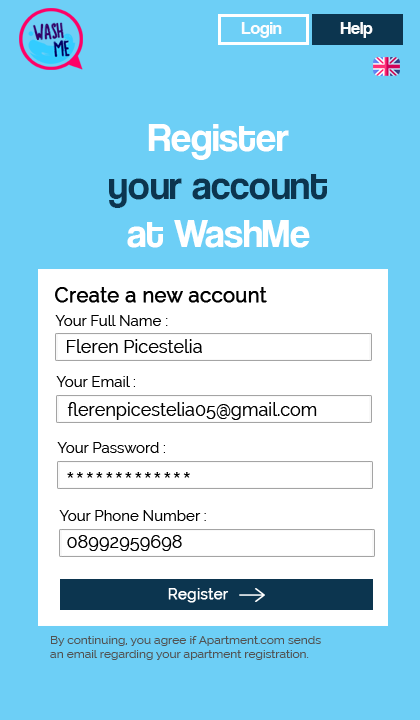
<style>
.page{position:relative;width:420px;height:720px;background:#6dcff6}
.page>*{position:absolute;margin:0}
.t1{font:18px "CoolveticaRg-Regular";color:#fbfdfe}
.t2{font:40px "CoolveticaRg-Regular";color:#0c354f}
.t3{font:40px "CoolveticaRg-Regular";color:#ffffff}
.t4{font:20px "Raleway";color:#000000;font-weight:bold}
.t5{font:15px "Raleway";color:#000000}
.t6{font:18px "Raleway";color:#000000}
.t7{font:30px "Raleway";color:#000000}
.t8{font:15px "Raleway";color:#ffffff;font-weight:bold}
.t9{font:12px "Raleway";color:#515252}
</style>
<div class="page">
<p class="t1" style="left:241px;top:22px;width:41px;height:16px">Login</p>
<p class="t1" style="left:340px;top:22px;width:33px;height:16px">Help</p>
<p class="t2" style="left:109px;top:124px;width:218px;height:124px;text-align:center"><span class="t3">Register<br></span>your account<br><span class="t3">at WashMe</span></p>
<p class="t4" style="left:55px;top:287px;width:212px;height:16px">Create a new account</p>
<p class="t5" style="left:55px;top:315px;width:113px;height:11px">Your Full Name :</p>
<p class="t6" style="left:67px;top:339px;width:135px;height:14px">Fleren Picestelia</p>
<p class="t5" style="left:56px;top:376px;width:79px;height:11px">Your Email :</p>
<p class="t6" style="left:67px;top:402px;width:250px;height:18px">flerenpicestelia05@gmail.com</p>
<p class="t5" style="left:57px;top:442px;width:108px;height:11px">Your Password :</p>
<p class="t7" style="left:67px;top:472px;width:123px;height:6px">*************</p>
<p class="t5" style="left:59px;top:510px;width:147px;height:11px">Your Phone Number :</p>
<p class="t6" style="left:67px;top:535px;width:115px;height:16px">08992959698</p>
<p class="t8" style="left:168px;top:588px;width:61px;height:15px">Register</p>
<p class="t9" style="left:50px;top:636px;width:271px;height:24px">By continuing, you agree if Apartment.com sends <br>an email regarding your apartment registration.</p>
</div>
